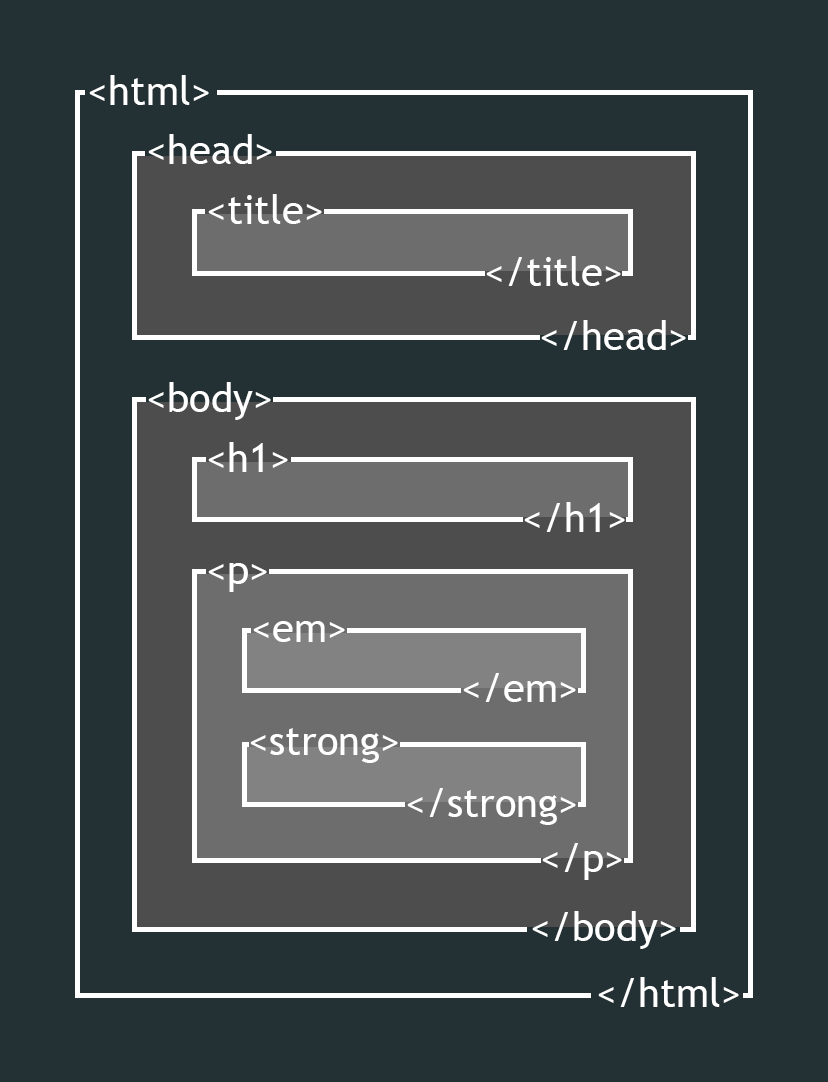
<style>
.page{position:relative;width:828px;height:1082px;background:#233135}
.page>*{position:absolute;margin:0}
.t1{font:40px "TrebuchetMS";color:#ffffff}
</style>
<div class="page">
<p class="t1" style="left:89px;top:75px;width:120px;height:30px">&lt;html&gt;</p>
<p class="t1" style="left:148px;top:134px;width:124px;height:30px">&lt;head&gt;</p>
<p class="t1" style="left:208px;top:194px;width:114px;height:30px">&lt;title&gt;</p>
<p class="t1" style="left:486px;top:256px;width:135px;height:30px">&lt;/title&gt;</p>
<p class="t1" style="left:541px;top:320px;width:145px;height:30px">&lt;/head&gt;</p>
<p class="t1" style="left:148px;top:382px;width:123px;height:38px">&lt;body&gt;</p>
<p class="t1" style="left:208px;top:442px;width:80px;height:30px">&lt;h1&gt;</p>
<p class="t1" style="left:524px;top:502px;width:101px;height:30px">&lt;/h1&gt;</p>
<p class="t1" style="left:208px;top:563px;width:59px;height:29px">&lt;p&gt;</p>
<p class="t1" style="left:253px;top:621px;width:92px;height:21px">&lt;em&gt;</p>
<p class="t1" style="left:463px;top:673px;width:113px;height:29px">&lt;/em&gt;</p>
<p class="t1" style="left:250px;top:728px;width:148px;height:35px">&lt;strong&gt;</p>
<p class="t1" style="left:407px;top:788px;width:169px;height:37px">&lt;/strong&gt;</p>
<p class="t1" style="left:542px;top:843px;width:80px;height:37px">&lt;/p&gt;</p>
<p class="t1" style="left:532px;top:911px;width:144px;height:38px">&lt;/body&gt;</p>
<p class="t1" style="left:598px;top:977px;width:141px;height:30px">&lt;/html&gt;</p>
</div>
